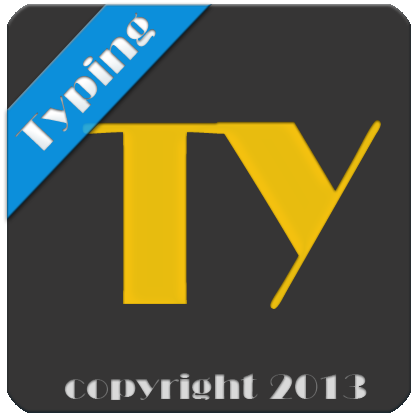
<style>
.page{position:relative;width:418px;height:418px;background:#363535}
.page>*{position:absolute;margin:0}
.t1{font:45px "BroadwayBT-Regular";color:#ebeff2}
.t2{font:257.1px "BroadwayBT-Regular";color:#e8bc0f;scale:0.78 1}
.t3{font:35.1px "BroadwayBT-Regular";color:#cecece}
</style>
<div class="page">
<p class="t1" style="left:15px;top:12px;width:141px;height:139px;rotate:-47deg">Typing</p>
<p class="t2" style="left:82px;top:119px;width:299px;height:190px">TY</p>
<p class="t3" style="left:64px;top:373px;width:303px;height:27px">copyright 2013</p>
</div>
